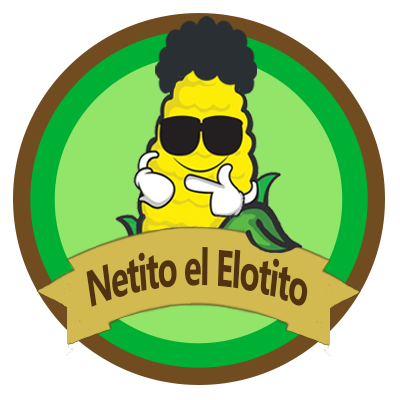
<style>
.page{position:relative;width:400px;height:400px;background:#ffffff}
.page>*{position:absolute;margin:0}
.t1{font:50.8px "MicrosoftPhagsPa-Bold";letter-spacing:-0.04em;color:#513311;scale:0.61 1}
</style>
<div class="page">
<p class="t1" style="left:86px;top:247px;width:222px;height:60px">Netito el Elotito</p>
</div>
